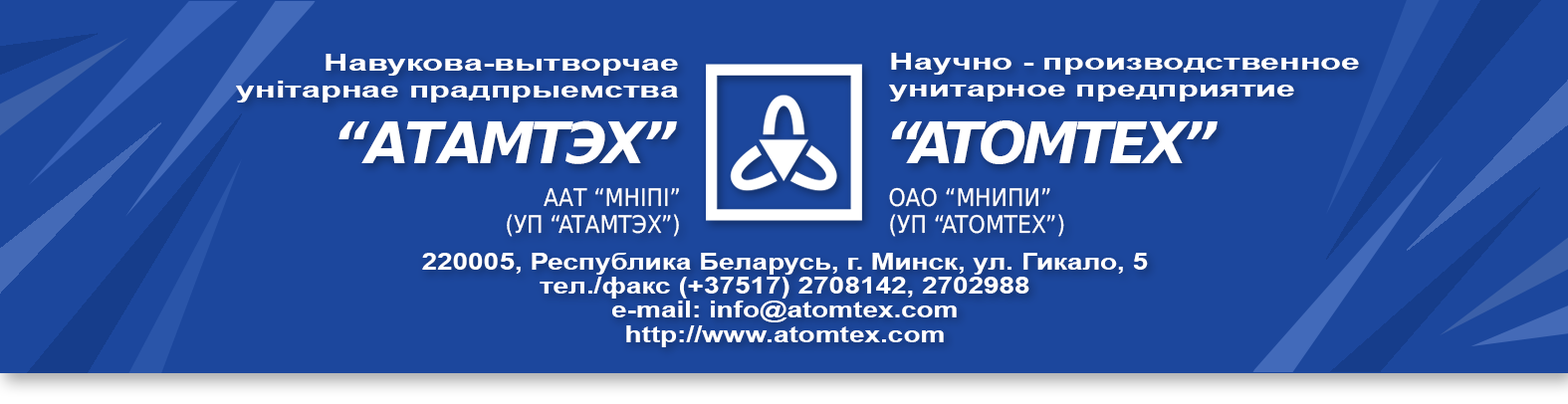
<style>
.page{position:relative;width:1568px;height:404px;background:#1c479d}
.page>*{position:absolute;margin:0}
.t1{font:23.2px/26.5px "Arial-BoldMT";color:#ffffff;scale:1.47 1}
.t2{font:56.7px "DejaVuSans-BoldOblique";letter-spacing:-0.075em;color:#ffffff}
.t3{font:24.2px/26.4px "DejaVuSansCondensed";color:#ffffff}
.t4{font:24.3px/26.4px "DejaVuSansCondensed";color:#ffffff}
.t5{font:23.2px/24.3px "Arial-BoldMT";color:#ffffff;scale:1.2 1}
</style>
<div class="page">
<p class="t1" style="left:236px;top:54px;width:442px;height:49px">Навукова-вытворчае<br>унiтарнае прадпрыемства</p>
<p class="t1" style="left:889px;top:53px;width:470px;height:49px;text-align:right">Научно - производственное<br>унитарное предприятие</p>
<p class="t2" style="left:338px;top:120px;width:339px;height:44px">“АТАМТЭХ”</p>
<p class="t2" style="left:891px;top:120px;width:327px;height:44px">“ATOMTEX”</p>
<p class="t3" style="left:507px;top:188px;width:172px;height:49px">ААТ “МНIПI”<br>(УП “ATАMTЭX”)</p>
<p class="t4" style="left:889px;top:187px;width:175px;height:50px;text-align:right">ОАО “МНИПИ”<br>(УП “ATOMTEX”)</p>
<p class="t5" style="left:422px;top:253px;width:726px;height:94px;text-align:center">220005, Республика Беларусь, г. Минск, ул. Гикало, 5<br>тел./факс (+37517) 2708142, 2702988<br>e-mail: info@atomtex.com<br>http://www.atomtex.com</p>
</div>
